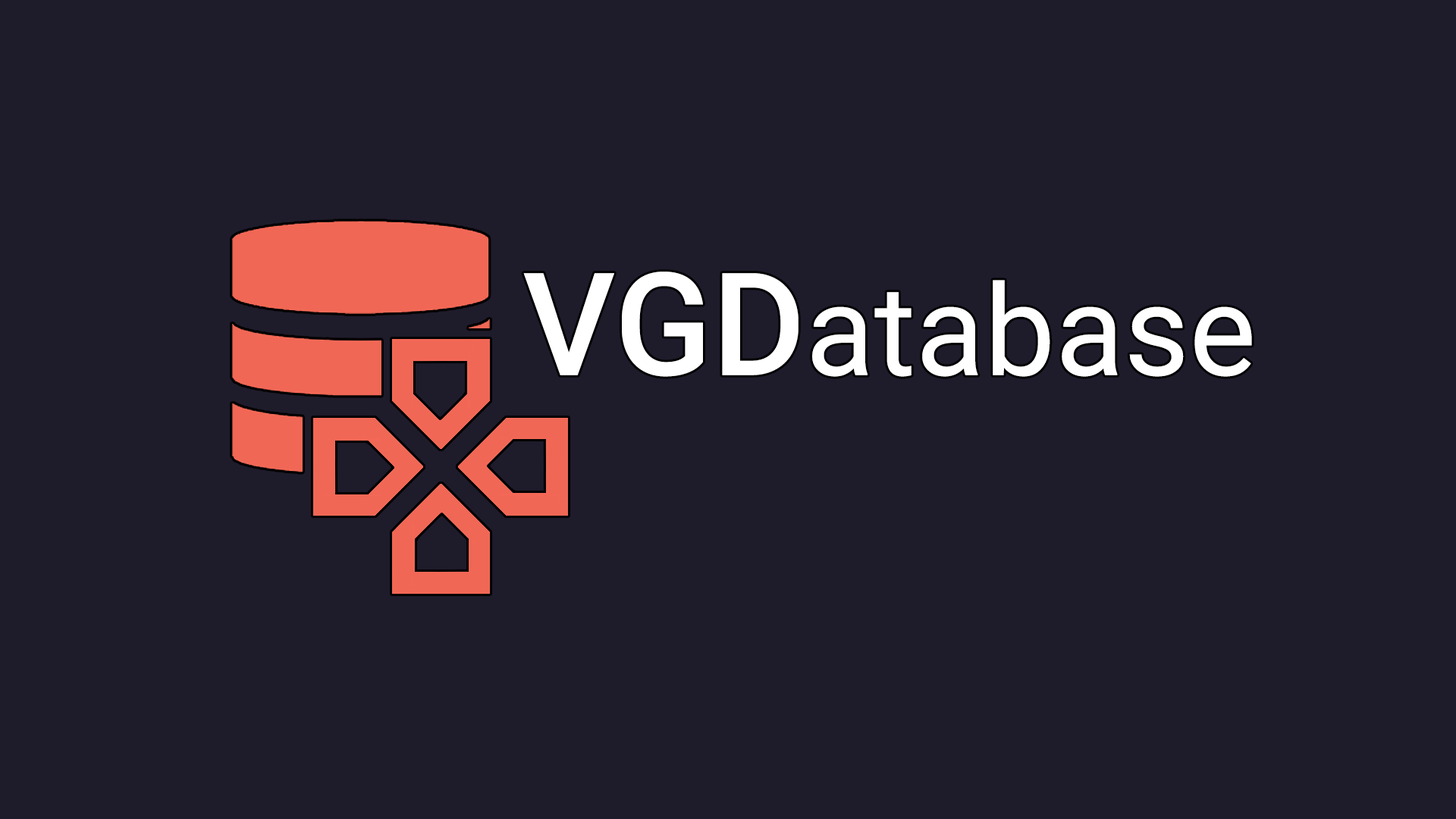
<style>
.page{position:relative;width:1456px;height:819px;background:#1e1b2b}
.page>*{position:absolute;margin:0}
.t1{font:126.4px "Roboto-Regular";color:#ffffff}
.t2{font:143.3px "Roboto-Medium";color:#ffffff}
</style>
<div class="page">
<p class="t1" style="left:523px;top:271px;width:729px;height:106px"><span class="t2">VGD</span>atabase</p>
</div>
